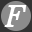
<style>
.page{position:relative;width:32px;height:32px;background:#8c8c8c}
.page>*{position:absolute;margin:0}
.t1{font:30px "News701BT-ItalicA";color:#ffffff}
</style>
<div class="page">
<p class="t1" style="left:4px;top:5px;width:23px;height:22px">F</p>
</div>
